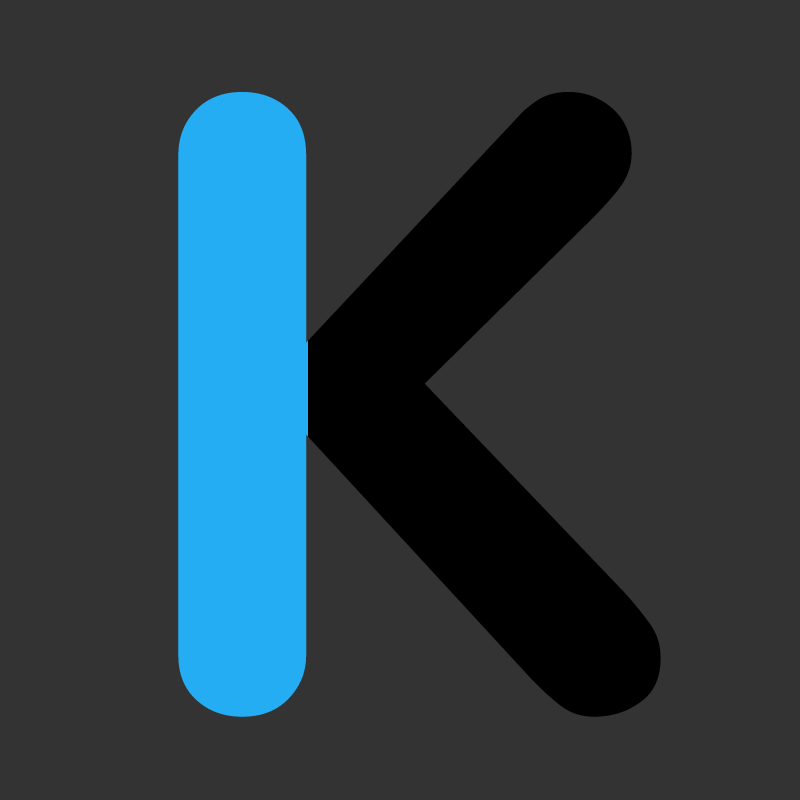
<style>
.page{position:relative;width:800px;height:800px;background:#333333}
.page>*{position:absolute;margin:0}
.t1{font:848.1px "Rotonda-Bold";letter-spacing:-0.05em;text-transform:uppercase}
</style>
<div class="page">
<p class="t1" style="left:178px;top:92px;width:483px;height:625px">k</p>
</div>
